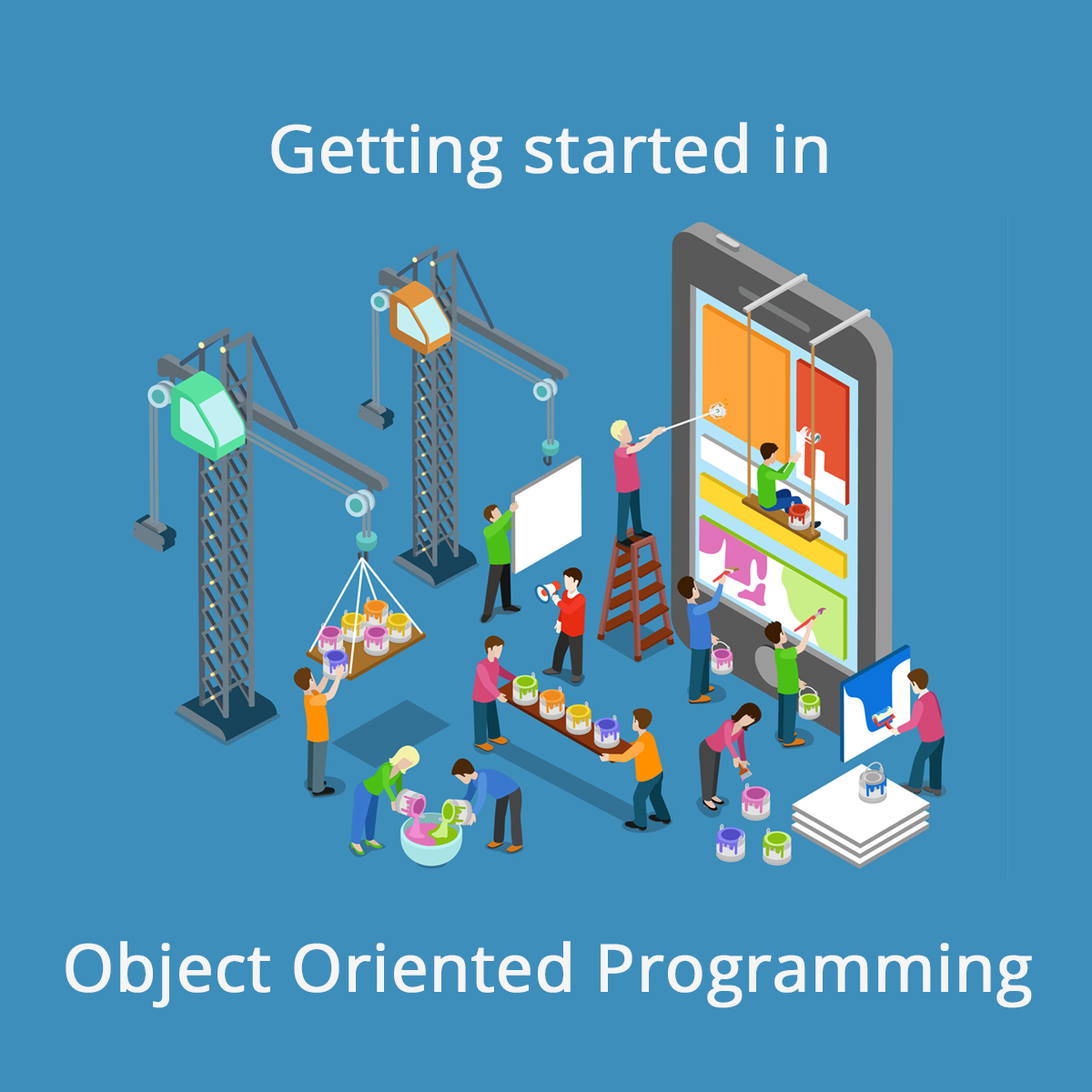
<style>
.page{position:relative;width:1092px;height:1092px;background:#3d8ebb}
.page>*{position:absolute;margin:0}
.t1{font:65.5px "OpenSans";color:#f5f5f5;font-weight:bold}
</style>
<div class="page">
<p class="t1" style="left:271px;top:122px;width:556px;height:67px">Getting started in</p>
<p class="t1" style="left:66px;top:941px;width:966px;height:67px">Object Oriented Programming</p>
</div>
